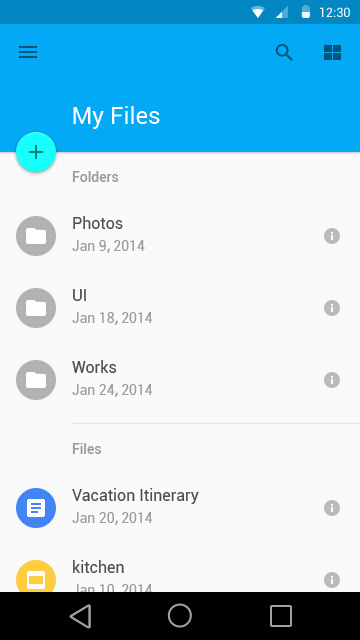
<style>
.page{position:relative;width:360px;height:640px;background:#fafafa}
.page>*{position:absolute;margin:0}
.t1{font:12.7px "Roboto-Regular";color:#ffffff}
.t2{font:24px "Roboto-Regular";color:#ffffff}
.t3{font:14px "Roboto-Medium";color:#999999}
.t4{font:16px "Roboto-Regular";color:#4d4d4d}
.t5{font:14px "Roboto-Regular";color:#999999}
.t6{font:14px "AdobeHeitiStd-Regular";color:#999999}
</style>
<div class="page">
<p class="t1" style="left:320px;top:7px;width:30px;height:10px">12:30</p>
<p class="t2" style="left:73px;top:106px;width:87px;height:23px">My Files</p>
<p class="t3" style="left:72px;top:171px;width:47px;height:11px">Folders</p>
<p class="t4" style="left:73px;top:216px;width:50px;height:13px">Photos</p>
<p class="t5" style="left:72px;top:240px;width:73px;height:13px">Jan 9<span class="t6">, </span>2014</p>
<p class="t4" style="left:73px;top:289px;width:13px;height:12px">UI</p>
<p class="t5" style="left:72px;top:312px;width:81px;height:13px">Jan 18<span class="t6">, </span>2014</p>
<p class="t4" style="left:72px;top:360px;width:45px;height:13px">Works</p>
<p class="t5" style="left:72px;top:384px;width:81px;height:13px">Jan 24<span class="t6">, </span>2014</p>
<p class="t3" style="left:72px;top:443px;width:29px;height:11px">Files</p>
<p class="t4" style="left:72px;top:488px;width:127px;height:16px">Vacation Itinerary</p>
<p class="t5" style="left:72px;top:512px;width:81px;height:13px">Jan 20<span class="t6">, </span>2014</p>
<p class="t4" style="left:73px;top:560px;width:51px;height:13px">kitchen</p>
</div>
